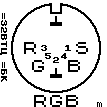
<style>
.page{position:relative;width:107px;height:107px;background:#ffffff}
.page>*{position:absolute;margin:0}
.t1{font:8px "ZX 6x8";letter-spacing:0.12em;color:#000000}
.t2{font:32px "zxSpectrumStrict";letter-spacing:0.12em;color:#000000}
.t3{font:16px "Speccy";color:#000000}
</style>
<div class="page">
<p class="t1" style="left:0px;top:14px;width:7px;height:68px;rotate:90deg">=32ВТЦ =БК</p>
<p class="t1" style="left:0px;top:13px;width:7px;height:68px;rotate:90deg">=32ВТЦ =БК</p>
<p class="t2" style="left:24px;top:42px;width:12px;height:12px">R</p>
<p class="t2" style="left:76px;top:42px;width:12px;height:12px">S</p>
<p class="t2" style="left:32px;top:60px;width:12px;height:12px">G</p>
<p class="t2" style="left:68px;top:60px;width:12px;height:12px">B</p>
<p class="t3" style="left:34px;top:95px;width:44px;height:12px">RGB</p>
</div>
